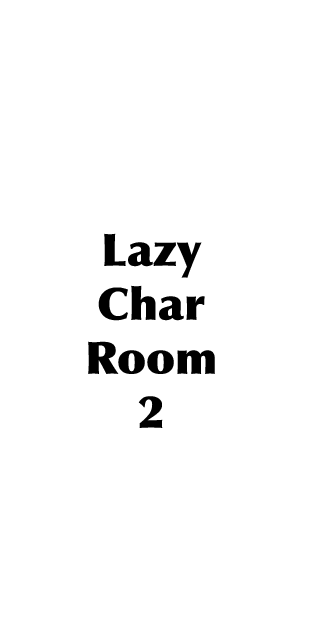
<style>
.page{position:relative;width:320px;height:640px;background:#ffffff}
.page>*{position:absolute;margin:0}
.t1{font:45px "Optima-ExtraBlack";color:#000000}
</style>
<div class="page">
<p class="t1" style="left:88px;top:233px;width:127px;height:195px;text-align:center">Lazy<br>Char<br>Room<br>2</p>
</div>
